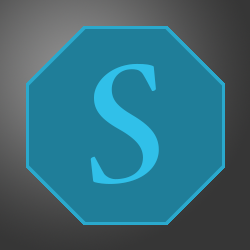
<style>
.page{position:relative;width:250px;height:250px;background:#1f7e99}
.page>*{position:absolute;margin:0}
.t1{font:256.5px "NuevaStd-Cond";color:#30c0e9;scale:1.15 1}
.t2{font:213.7px "MyriadPro-Regular";color:#30c0e9;scale:1.15 1}
</style>
<div class="page">
<p class="t1" style="left:90px;top:63px;width:69px;height:121px;text-align:center">s<br><span class="t2">S</span></p>
</div>
